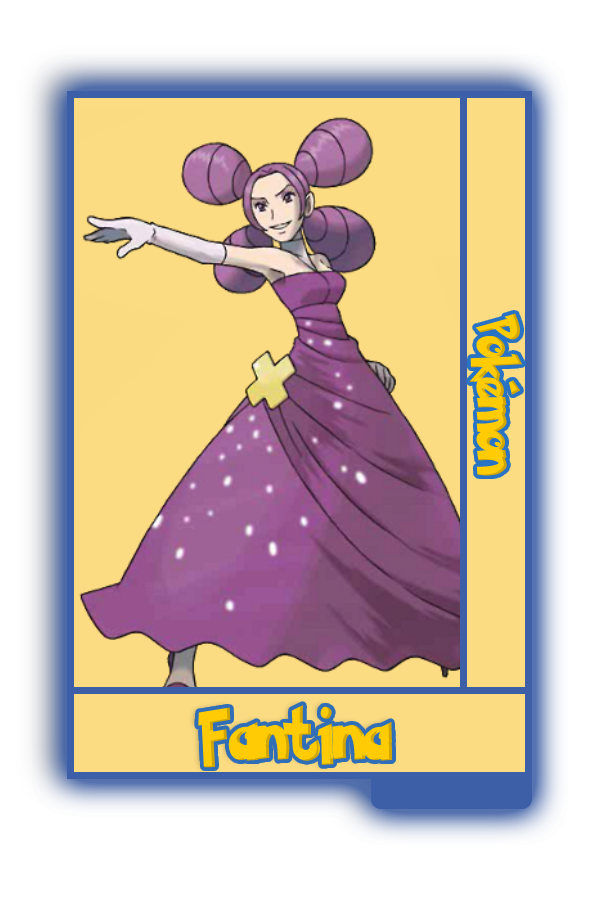
<style>
.page{position:relative;width:600px;height:900px;background:#fbdc83}
.page>*{position:absolute;margin:0}
.t1{font:48.8px "PokemonSolidNormal";color:#ffcb05;scale:0.8 1}
.t2{font:56.6px "PokemonSolidNormal";color:#ffcb05;scale:0.92 1}
</style>
<div class="page">
<p class="t1" style="left:469px;top:313px;width:54px;height:163px;rotate:90deg">Pokémon</p>
<p class="t2" style="left:198px;top:705px;width:195px;height:63px">Fantina</p>
</div>
